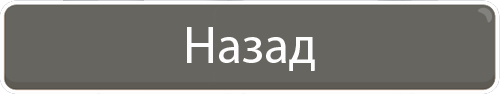
<style>
.page{position:relative;width:500px;height:94px;background:#66655f}
.page>*{position:absolute;margin:0}
.t1{font:52px "MyriadPro-Regular";color:#fdfdfd}
</style>
<div class="page">
<p class="t1" style="left:187px;top:27px;width:128px;height:44px">Назад</p>
</div>
